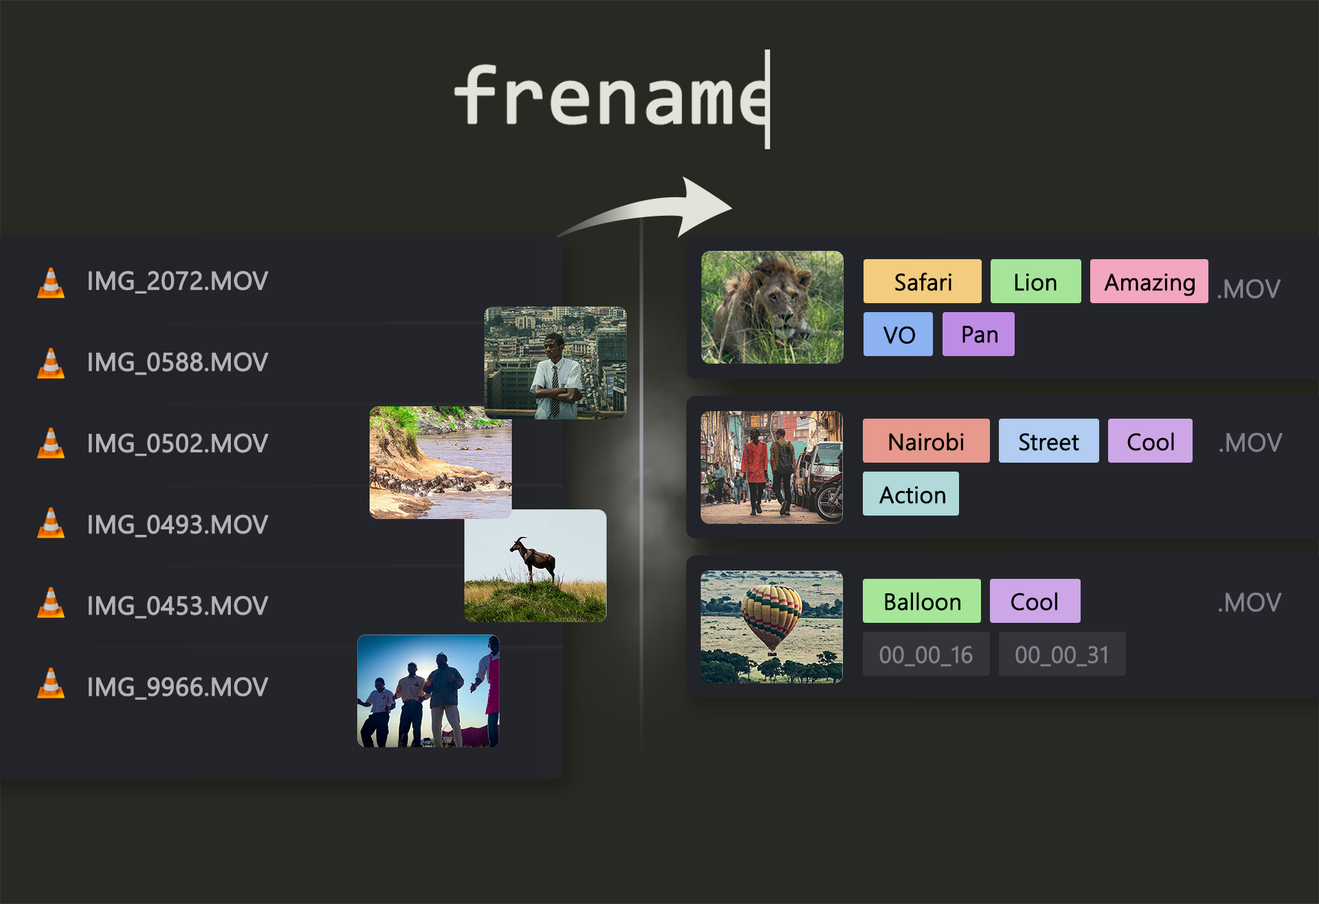
<style>
.page{position:relative;width:1319px;height:904px;background:#282923}
.page>*{position:absolute;margin:0}
.t1{font:25.2px/81.2px "SegoeUI";color:#b2b3b8;font-weight:bold}
.t2{font:22.9px "SegoeUI-Semilight";color:#000000;font-weight:bold}
.t3{font:25.2px "SegoeUI-Semilight";color:#82828e;font-weight:bold}
.t4{font:22.9px "SegoeUI-Semilight";color:#82828e;font-weight:bold}
</style>
<div class="page">
<p class="t1" style="left:89px;top:271px;width:180px;height:429px">IMG_2072.MOV<br>IMG_0588.MOV<br>IMG_0502.MOV<br>IMG_0493.MOV<br>IMG_0453.MOV<br>IMG_9966.MOV</p>
<p class="t2" style="left:895px;top:272px;width:57px;height:19px">Safari</p>
<p class="t2" style="left:1015px;top:273px;width:42px;height:18px">Lion</p>
<p class="t2" style="left:1104px;top:273px;width:91px;height:23px">Amazing</p>
<p class="t3" style="left:1218px;top:279px;width:64px;height:19px">.MOV</p>
<p class="t2" style="left:884px;top:326px;width:31px;height:18px">VO</p>
<p class="t2" style="left:963px;top:326px;width:35px;height:17px">Pan</p>
<p class="t2" style="left:889px;top:432px;width:75px;height:19px">Nairobi</p>
<p class="t2" style="left:1020px;top:433px;width:60px;height:18px">Street</p>
<p class="t2" style="left:1128px;top:432px;width:46px;height:19px">Cool</p>
<p class="t3" style="left:1220px;top:432px;width:63px;height:20px">.MOV</p>
<p class="t2" style="left:880px;top:486px;width:66px;height:18px">Action</p>
<p class="t2" style="left:885px;top:592px;width:76px;height:18px">Balloon</p>
<p class="t2" style="left:1012px;top:592px;width:46px;height:18px">Cool</p>
<p class="t3" style="left:1219px;top:592px;width:63px;height:20px">.MOV</p>
<p class="t4" style="left:880px;top:645px;width:93px;height:22px">00_00_16</p>
<p class="t4" style="left:1016px;top:645px;width:91px;height:22px">00_00_31</p>
</div>
